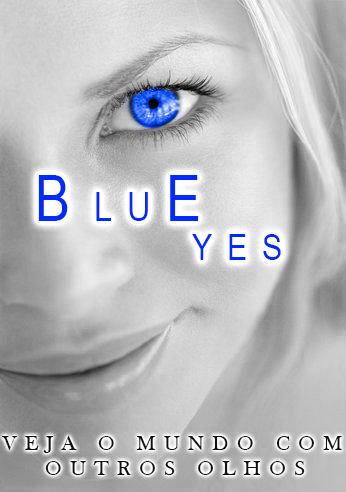
<style>
.page{position:relative;width:346px;height:492px}
.page>*{position:absolute;margin:0}
.t1{font:40px "ArialNarrow";letter-spacing:0.38em;color:#002afe;text-transform:uppercase}
.t2{font:64px "ArialNarrow";letter-spacing:0.38em;color:#002afe;text-transform:uppercase}
.t3{font:37.3px "ArialNarrow";letter-spacing:0.38em;color:#002afe;text-transform:uppercase}
.t4{font:21.3px "BaskOldFace";letter-spacing:0.38em;color:#111111;text-transform:uppercase}
</style>
<div class="page">
<p class="t1" style="left:38px;top:175px;width:161px;height:46px"><span class="t2">B</span>lu<span class="t2">E</span></p>
<p class="t3" style="left:192px;top:234px;width:89px;height:26px">yes</p>
<p class="t4" style="left:1px;top:436px;width:341px;height:39px;text-align:center">Veja o mundo com <br>outros olhos</p>
</div>
